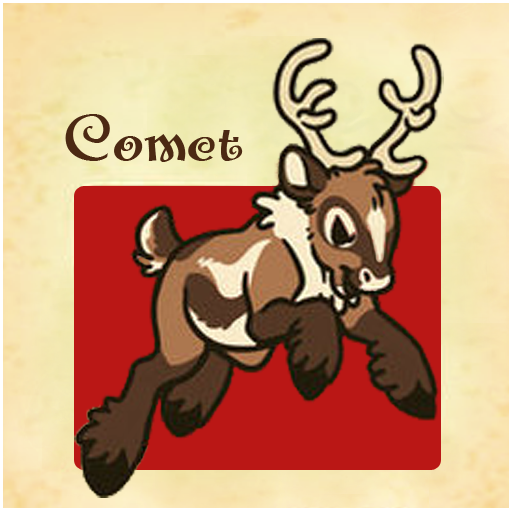
<style>
.page{position:relative;width:512px;height:512px}
.page>*{position:absolute;margin:0}
.t1{font:66.7px "SantasBigSecretBB";color:#4c2913}
</style>
<div class="page">
<p class="t1" style="left:65px;top:114px;width:178px;height:48px">Comet</p>
</div>
